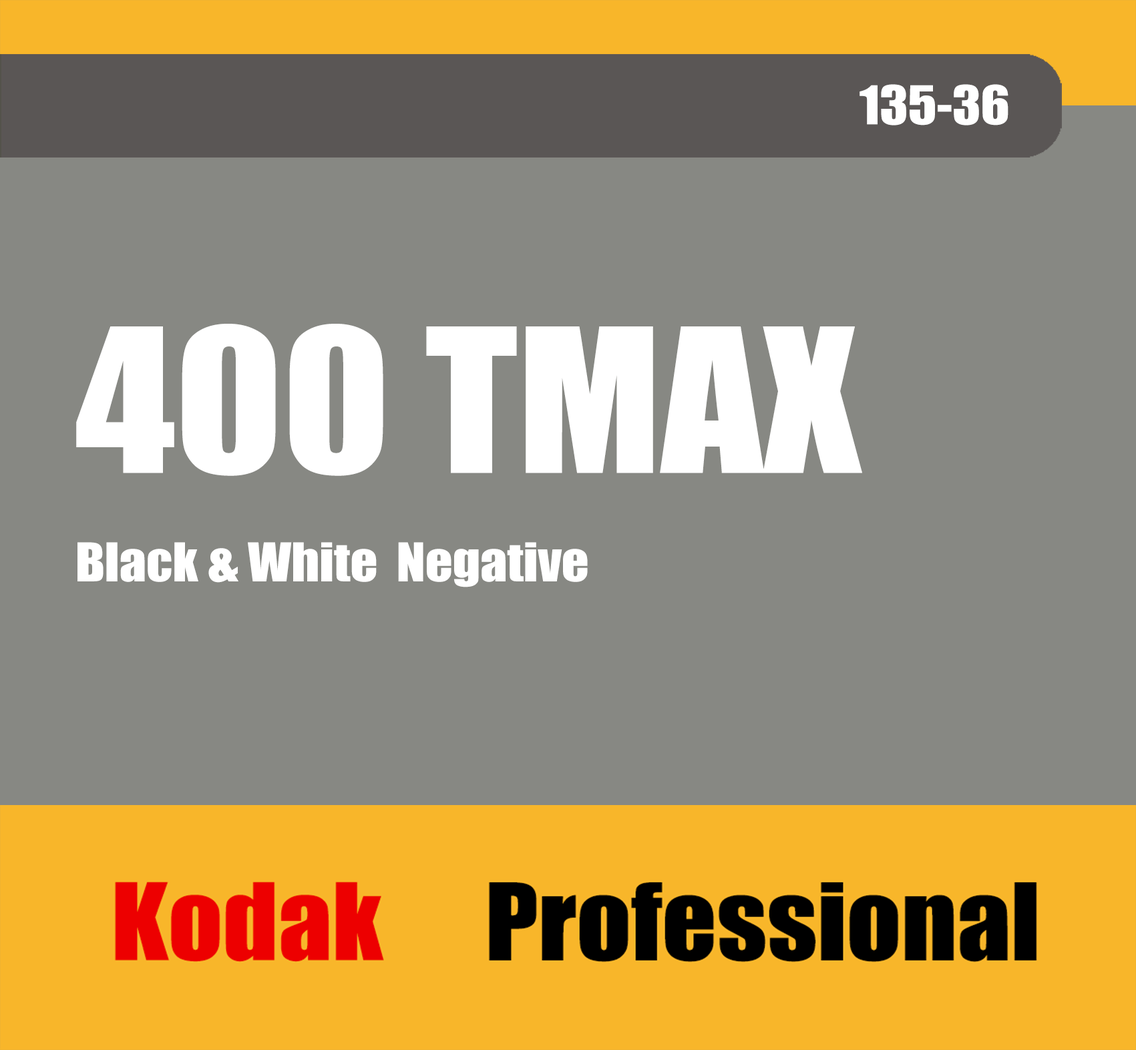
<style>
.page{position:relative;width:1136px;height:1050px;background:#878883}
.page>*{position:absolute;margin:0}
.t1{font:49.4px "Impact";color:#ffffff;scale:1.08 1}
.t2{font:185.2px "Impact";color:#ffffff;scale:1.08 1}
</style>
<div class="page">
<p class="t1" style="left:859px;top:84px;width:149px;height:42px">135-36</p>
<p class="t2" style="left:76px;top:324px;width:786px;height:152px">400 TMAX</p>
<p class="t1" style="left:77px;top:542px;width:510px;height:45px">Black &amp; White  Negative Film</p>
</div>
